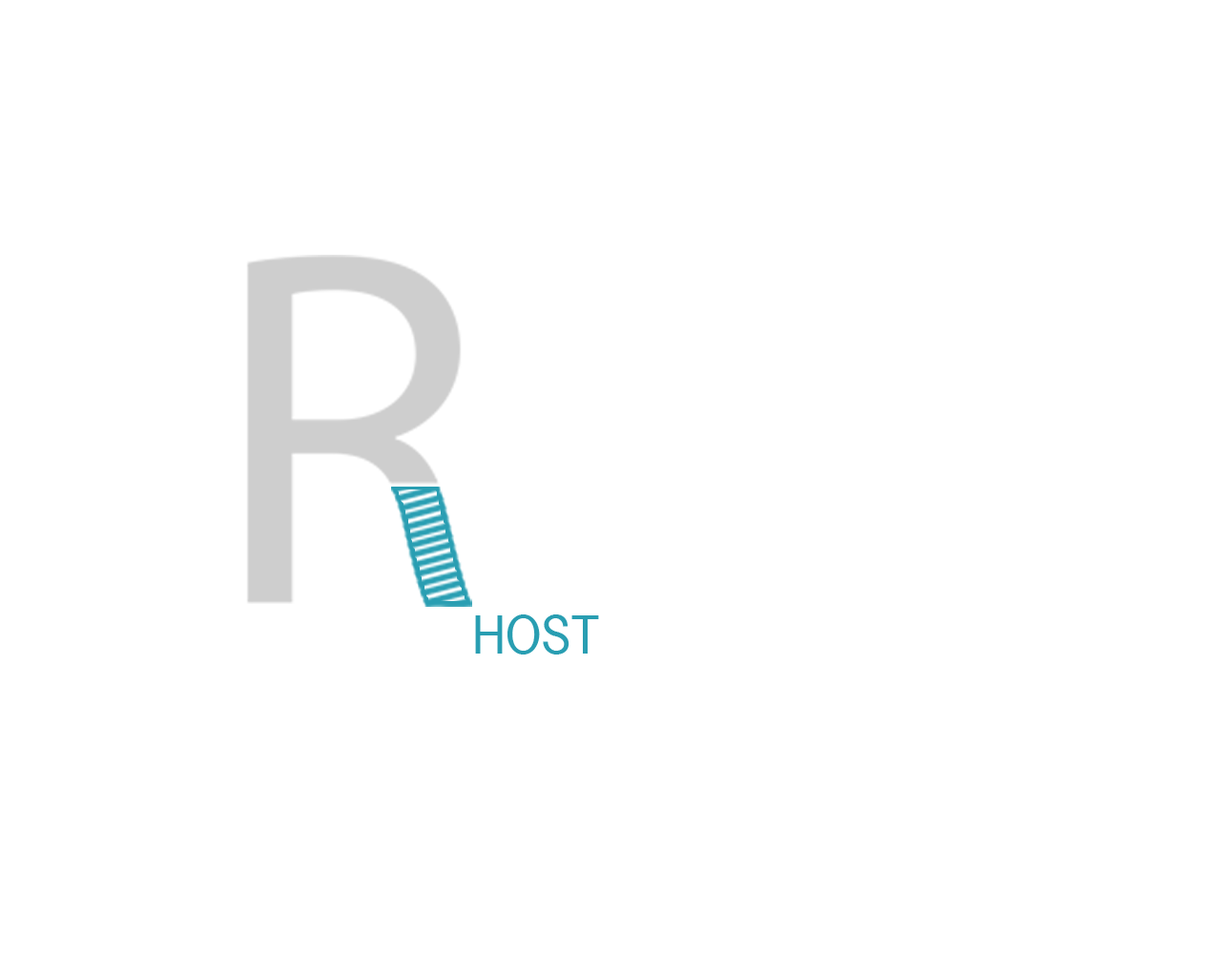
<style>
.page{position:relative;width:1221px;height:977px;background:#ffffff}
.page>*{position:absolute;margin:0}
.t1{font:58px "InaiMathi";color:#299eb2}
</style>
<div class="page">
<p class="t1" style="left:475px;top:614px;width:124px;height:40px">HOST</p>
</div>
